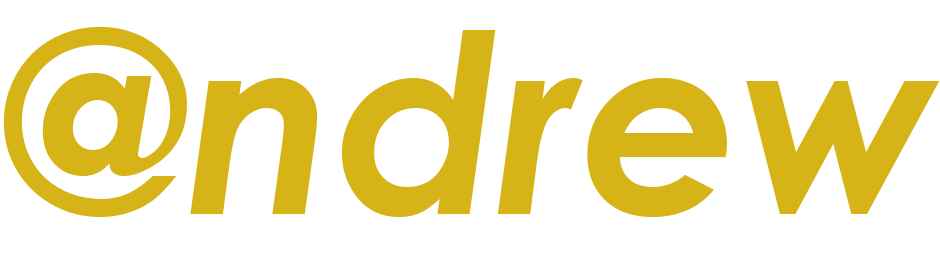
<style>
.page{position:relative;width:940px;height:256px;background:#ffffff}
.page>*{position:absolute;margin:0}
.t1{font:250px "CenturyGothic-BoldItalic";color:#d6b417}
</style>
<div class="page">
<p class="t1" style="left:3px;top:27px;width:937px;height:190px">@ndrew</p>
</div>
